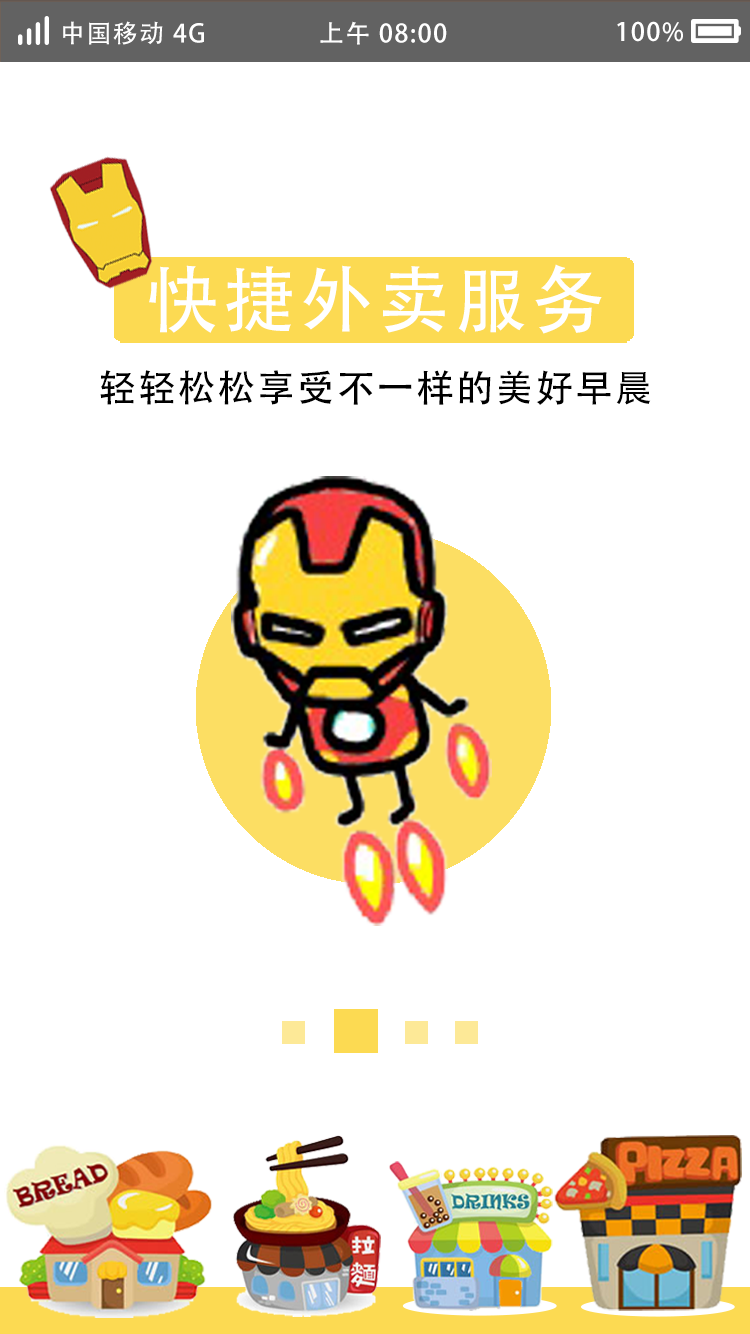
<style>
.page{position:relative;width:750px;height:1334px;background:#ffffff}
.page>*{position:absolute;margin:0}
.t1{font:25px "AdobeHeitiStd-Regular";letter-spacing:0.06em;color:#ffffff}
.t2{font:73px "AdobeHeitiStd-Regular";letter-spacing:0.06em;color:#ffffff}
.t3{font:37.5px "AdobeHeitiStd-Regular";letter-spacing:0.06em;color:#000000}
</style>
<div class="page">
<p class="t1" style="left:63px;top:21px;width:141px;height:24px">中国移动 4G</p>
<p class="t1" style="left:320px;top:21px;width:127px;height:24px">上午 08:00</p>
<p class="t1" style="left:617px;top:21px;width:66px;height:21px">100%</p>
<p class="t2" style="left:149px;top:264px;width:453px;height:70px">快捷外卖服务</p>
<p class="t3" style="left:100px;top:370px;width:551px;height:35px">轻轻松松享受不一样的美好早晨</p>
</div>
